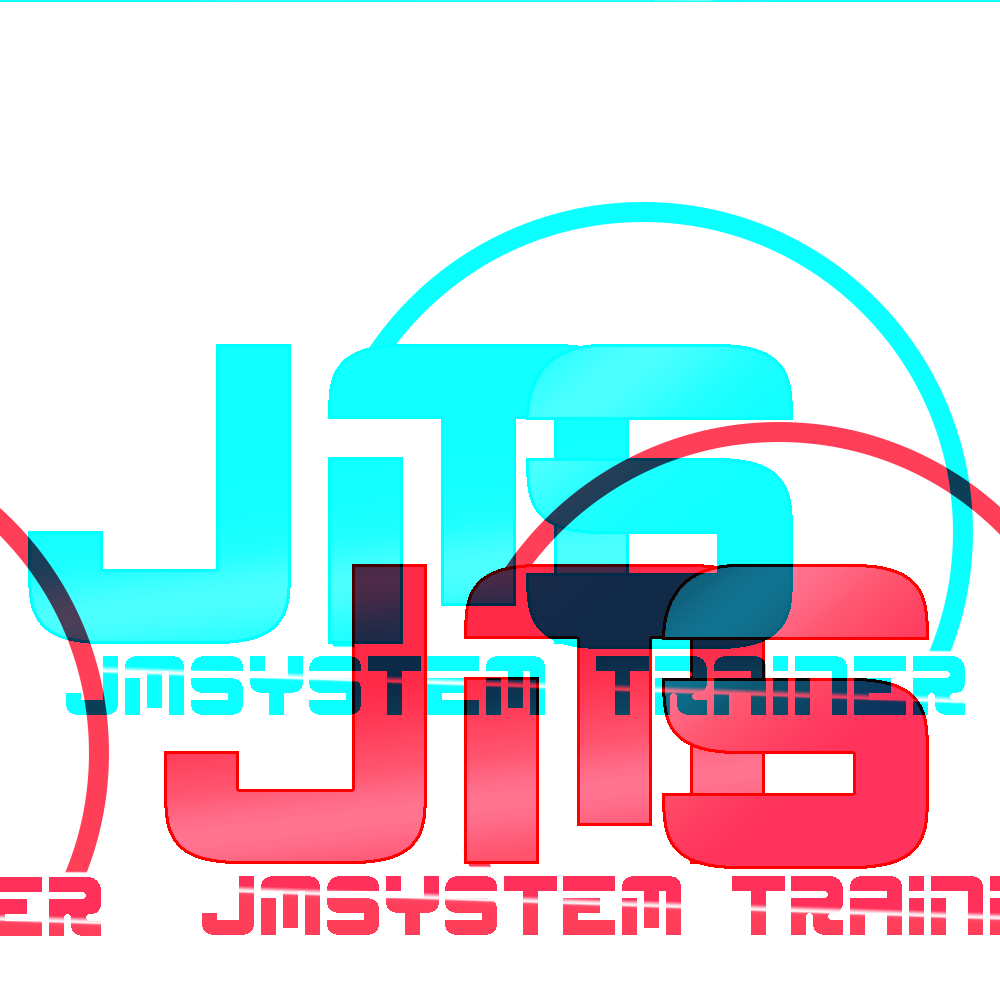
<style>
.page{position:relative;width:1000px;height:1000px;background:#ffffff}
.page>*{position:absolute;margin:0}
.t1{font:375px "ESP"}
.t2{font:381.5px "ESP"}
.t3{font:73.8px "ESP"}
</style>
<div class="page">
<p class="t1" style="left:28px;top:342px;width:601px;height:300px">jm</p>
<p class="t2" style="left:526px;top:342px;width:267px;height:305px">s</p>
<p class="t3" style="left:66px;top:654px;width:899px;height:59px">jmsystem trainer</p>
</div>
